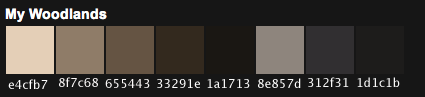
<style>
.page{position:relative;width:425px;height:97px;background:#161616}
.page>*{position:absolute;margin:0}
.t1{font:12px "LucidaGrande";color:#fcf9f9}
.t2{font:12px "LucidaGrande";color:#fefefe}
.t3{font:12px "LucidaGrande";color:#fafafa}
.t4{font:12px "LucidaGrande";color:#fbf8f8}
</style>
<div class="page">
<p class="t1" style="left:59px;top:77px;width:39px;height:10px">8f7c68</p>
<p class="t2" style="left:258px;top:78px;width:43px;height:10px">8e857d</p>
<p class="t3" style="left:308px;top:77px;width:41px;height:10px">312f31</p>
<p class="t3" style="left:357px;top:77px;width:43px;height:10px">1d1c1b</p>
<p class="t2" style="left:8px;top:79px;width:40px;height:10px">e4cfb7</p>
<p class="t4" style="left:105px;top:79px;width:45px;height:9px">655443</p>
<p class="t2" style="left:157px;top:79px;width:43px;height:9px">33291e</p>
<p class="t3" style="left:207px;top:79px;width:43px;height:9px">1a1713</p>
</div>
